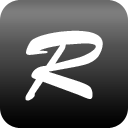
<style>
.page{position:relative;width:128px;height:128px}
.page>*{position:absolute;margin:0}
.t1{font:95.6px "BrushScriptStd";color:#ffffff}
</style>
<div class="page">
<p class="t1" style="left:25px;top:30px;width:78px;height:71px">R</p>
</div>
